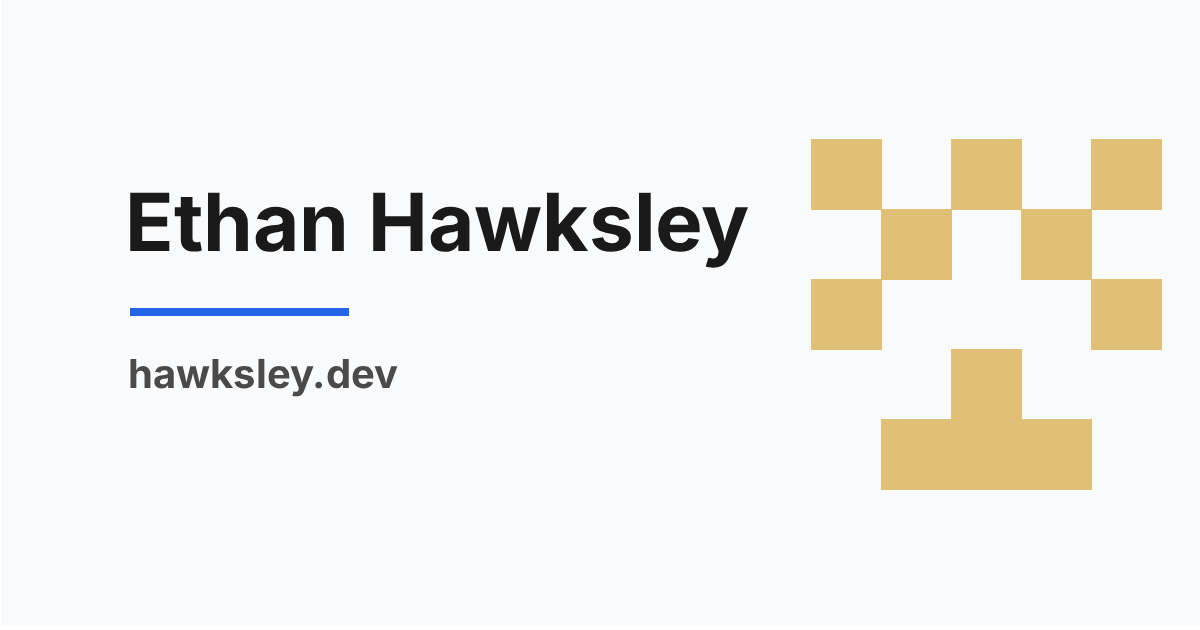
<style>
.page{position:relative;width:1200px;height:630px;background:#f9fafb}
.page>*{position:absolute;margin:0}
.t1{font:80px "Inter-Bold";color:#1a1a1a}
.t2{font:40px "Inter-Bold";color:#4a4a4a}
</style>
<div class="page">
<p class="t1" style="left:130px;top:192px;width:618px;height:76px">Ethan Hawksley</p>
<p class="t2" style="left:130px;top:358px;width:268px;height:39px">hawksley.dev</p>
</div>
